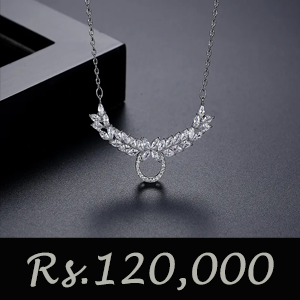
<style>
.page{position:relative;width:300px;height:300px}
.page>*{position:absolute;margin:0}
.t1{font:41.7px "LucidaHandwriting-Italic";color:#b5b4ac}
</style>
<div class="page">
<p class="t1" style="left:27px;top:252px;width:247px;height:39px">Rs.120,000</p>
</div>
